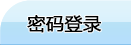
<style>
.page{position:relative;width:131px;height:45px}
.page>*{position:absolute;margin:0}
.t1{font:18px "MicrosoftYaHei";color:#000000;font-weight:bold}
</style>
<div class="page">
<p class="t1" style="left:27px;top:15px;width:75px;height:18px">密码登录</p>
</div>
